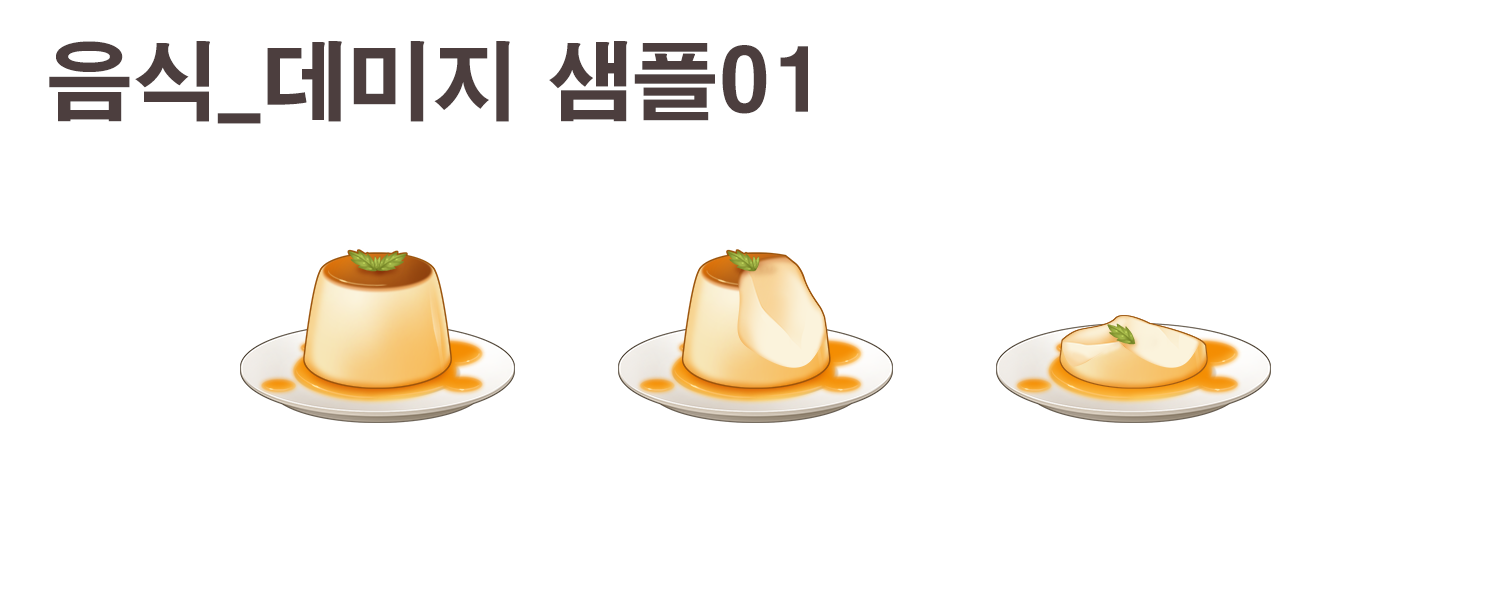
<style>
.page{position:relative;width:1511px;height:592px;background:#ffffff}
.page>*{position:absolute;margin:0}
.t1{font:85.7px "H2gtrE";color:#4c3e3e}
</style>
<div class="page">
<p class="t1" style="left:49px;top:41px;width:759px;height:83px">음식_데미지 샘플01</p>
</div>
